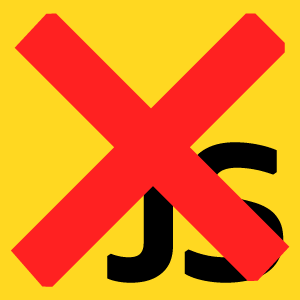
<style>
.page{position:relative;width:300px;height:300px;background:#ffd821}
.page>*{position:absolute;margin:0}
.t1{font:500px "MS-Gothic";letter-spacing:-0.075em;color:#ff2121;font-weight:bold}
.t2{font:200px "Corbel-Bold";letter-spacing:-0.075em;font-weight:bold}
</style>
<div class="page">
<p class="t1" style="left:11px;top:13px;width:279px;height:274px">×</p>
<p class="t2" style="left:107px;top:142px;width:177px;height:141px">JS</p>
</div>
